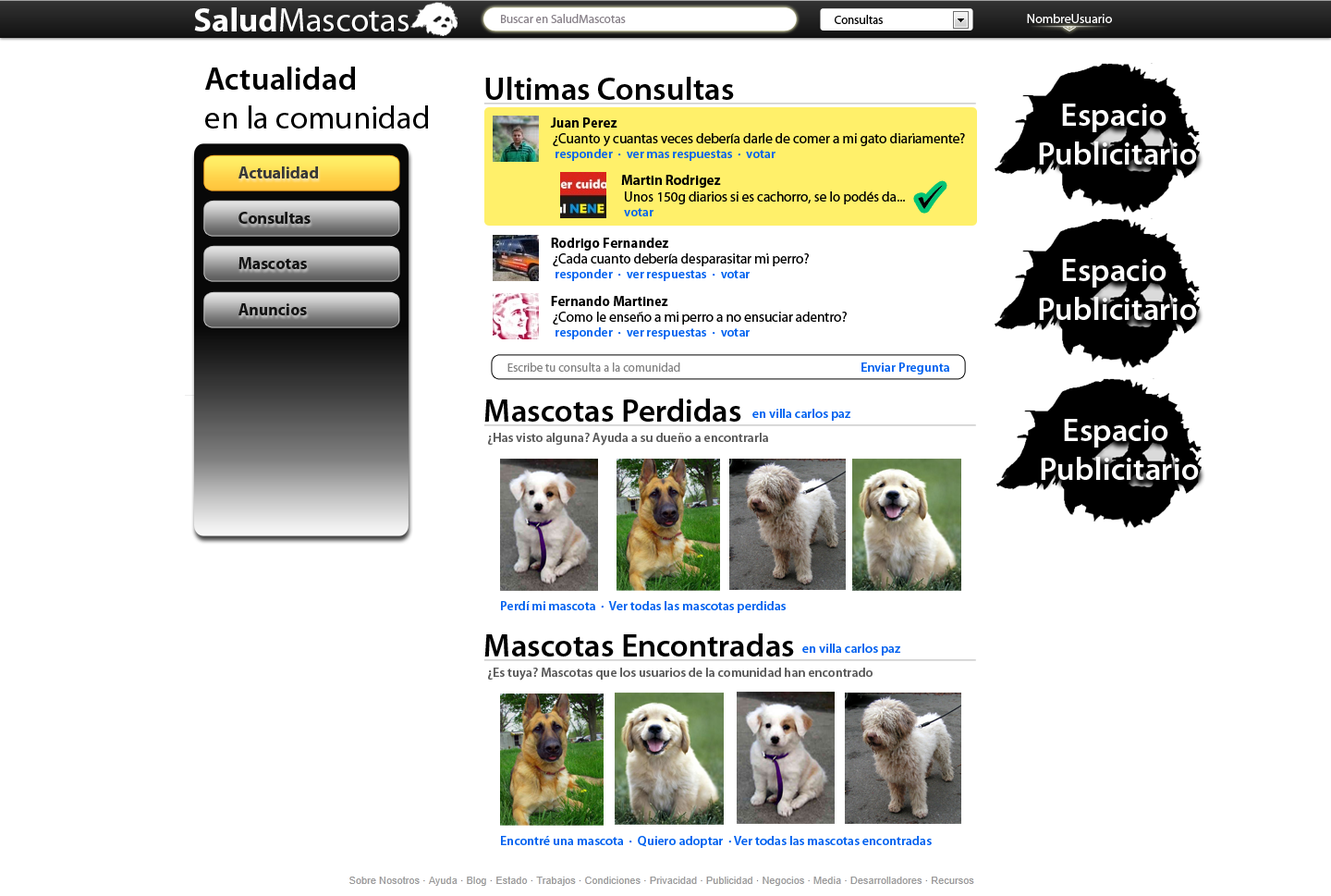
<style>
.page{position:relative;width:1331px;height:896px;background:#ffffff}
.page>*{position:absolute;margin:0}
.t1{font:33.8px "MyriadPro-Regular";color:#ffffff}
.t2{font:33.8px "MyriadPro-Bold";color:#ffffff}
.t3{font:12px "MyriadPro-Regular";color:#878088}
.t4{font:12px "MyriadPro-Regular";color:#000000}
.t5{font:12.9px "MyriadPro-Regular";color:#ffffff}
.t6{font:32.4px "MyriadPro-Regular";color:#000000}
.t7{font:32.4px "MyriadPro-Semibold";color:#000000}
.t8{font:32.4px "MyriadPro-Semibold";color:#ffffff}
.t9{font:13.9px "MyriadPro-Bold";color:#000000}
.t10{font:13.9px "MyriadPro-Regular";color:#000000}
.t11{font:12.9px "MyriadPro-Semibold";color:#0061ef}
.t12{font:16.6px "MyriadPro-Bold";color:#373737}
.t13{font:16.6px "MyriadPro-Bold";color:#141414}
.t14{font:12px "MyriadPro-Regular";color:#828282}
.t15{font:12.9px "MyriadPro-Semibold";color:#575757}
</style>
<div class="page">
<p class="t1" style="left:194px;top:7px;width:215px;height:24px"><span class="t2">Salud</span>Mascotas</p>
<p class="t3" style="left:501px;top:14px;width:125px;height:9px">Buscar en SaludMascotas</p>
<p class="t4" style="left:835px;top:15px;width:48px;height:9px">Consultas</p>
<p class="t5" style="left:1027px;top:14px;width:85px;height:9px">NombreUsuario</p>
<p class="t6" style="left:205px;top:67px;width:223px;height:61px"><span class="t7">Actualidad<br></span>en la comunidad</p>
<p class="t7" style="left:485px;top:77px;width:249px;height:23px">Ultimas Consultas</p>
<p class="t8" style="left:1039px;top:104px;width:158px;height:61px;text-align:center">Espacio <br>Publicitario</p>
<p class="t9" style="left:550px;top:117px;width:68px;height:11px">Juan Perez</p>
<p class="t10" style="left:553px;top:133px;width:412px;height:13px">¿Cuanto y cuantas veces debería darle de comer a mi gato diariamente?</p>
<p class="t11" style="left:556px;top:149px;width:220px;height:12px">responder  ·  ver mas respuestas  ·  votar</p>
<p class="t12" style="left:239px;top:166px;width:79px;height:12px">Actualidad</p>
<p class="t9" style="left:621px;top:175px;width:100px;height:13px">Martin Rodrigez</p>
<p class="t10" style="left:625px;top:191px;width:280px;height:13px">Unos 150g diarios si es cachorro, se lo podés da...</p>
<p class="t11" style="left:624px;top:208px;width:30px;height:8px">votar</p>
<p class="t13" style="left:239px;top:212px;width:72px;height:12px">Consultas</p>
<p class="t9" style="left:551px;top:238px;width:117px;height:13px">Rodrigo Fernandez</p>
<p class="t13" style="left:239px;top:257px;width:68px;height:12px">Mascotas</p>
<p class="t10" style="left:553px;top:253px;width:256px;height:13px">¿Cada cuanto debería desparasitar mi perro?</p>
<p class="t11" style="left:556px;top:269px;width:194px;height:12px">responder  ·  ver respuestas  ·  votar</p>
<p class="t8" style="left:1039px;top:259px;width:158px;height:61px;text-align:center">Espacio <br>Publicitario</p>
<p class="t13" style="left:239px;top:303px;width:68px;height:12px">Anuncios</p>
<p class="t9" style="left:551px;top:296px;width:117px;height:10px">Fernando Martinez</p>
<p class="t10" style="left:553px;top:312px;width:294px;height:12px">¿Como le enseño a mi perro a no ensuciar adentro?</p>
<p class="t11" style="left:556px;top:327px;width:194px;height:12px">responder  ·  ver respuestas  ·  votar</p>
<p class="t14" style="left:508px;top:362px;width:172px;height:10px">Escribe tu consulta a la comunidad</p>
<p class="t11" style="left:862px;top:362px;width:87px;height:12px">Enviar Pregunta</p>
<p class="t7" style="left:484px;top:398px;width:257px;height:24px">Mascotas Perdidas</p>
<p class="t11" style="left:752px;top:409px;width:98px;height:12px">en villa carlos paz</p>
<p class="t8" style="left:1041px;top:419px;width:158px;height:61px;text-align:center">Espacio <br>Publicitario</p>
<p class="t15" style="left:488px;top:433px;width:280px;height:13px">¿Has visto alguna? Ayuda a su dueño a encontrarla</p>
<p class="t11" style="left:501px;top:601px;width:285px;height:12px">Perdí mi mascota  ·  Ver todas las mascotas perdidas</p>
<p class="t7" style="left:484px;top:633px;width:310px;height:23px">Mascotas Encontradas</p>
<p class="t11" style="left:802px;top:643px;width:98px;height:12px">en villa carlos paz</p>
<p class="t15" style="left:488px;top:667px;width:385px;height:13px">¿Es tuya? Mascotas que los usuarios de la comunidad han encontrado</p>
<p class="t11" style="left:501px;top:836px;width:431px;height:12px">Encontré una mascota  ·  Quiero adoptar  · Ver todas las mascotas encontradas</p>
</div>
